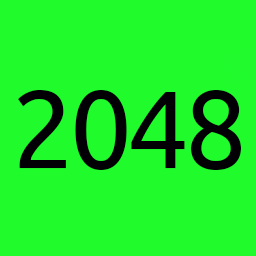
<style>
.page{position:relative;width:256px;height:256px;background:#20fb2b}
.page>*{position:absolute;margin:0}
.t1{font:109.8px "Ubuntu-Regular";letter-spacing:-0.04em;color:#020004}
</style>
<div class="page">
<p class="t1" style="left:18px;top:90px;width:223px;height:80px">2048</p>
</div>
